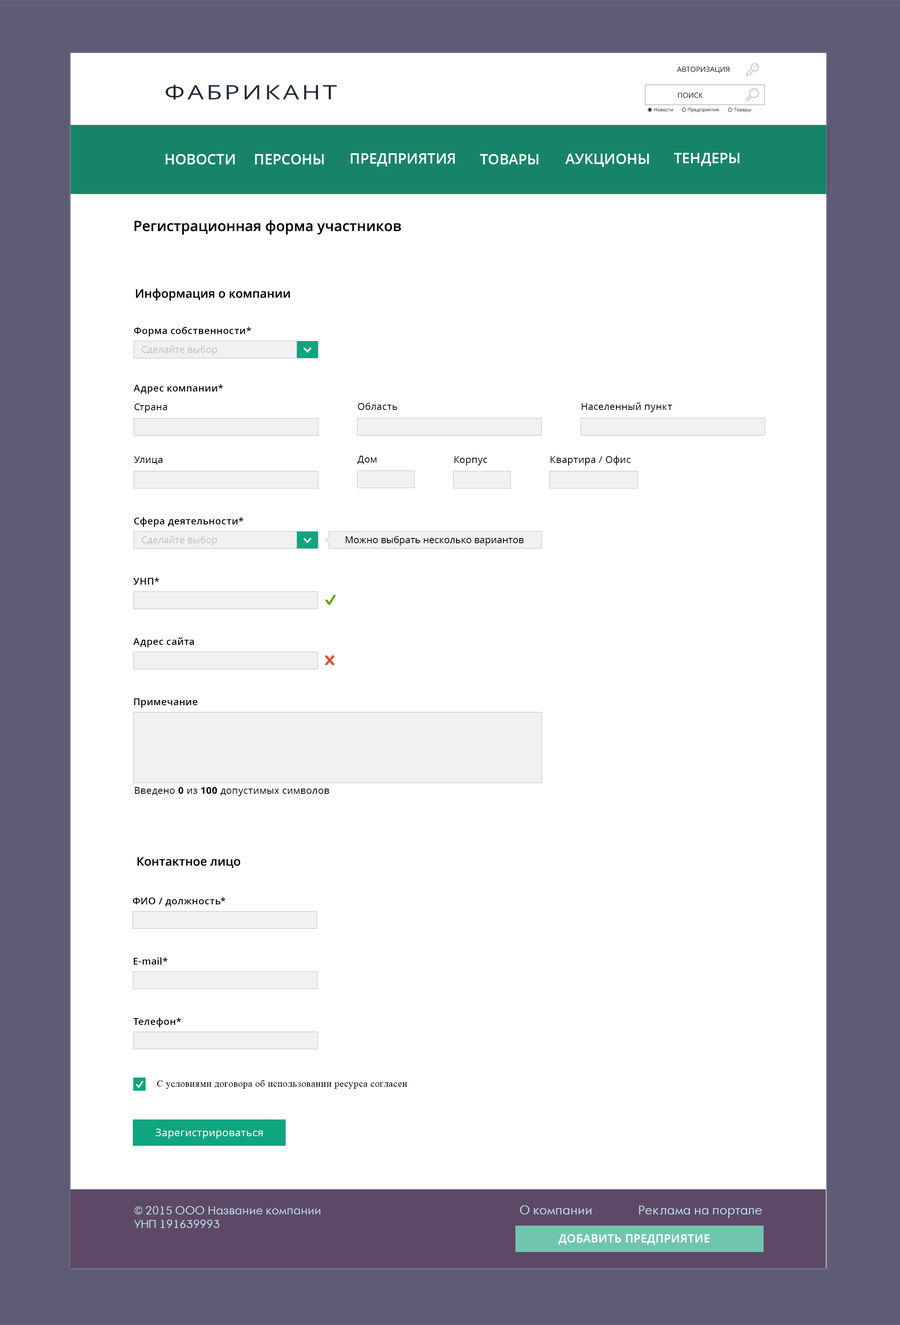
<style>
.page{position:relative;width:900px;height:1325px;background:#ffffff}
.page>*{position:absolute;margin:0}
.t1{font:7.2px "OpenSans";color:#000000;text-transform:uppercase}
.t2{font:20px "OpenSans";letter-spacing:0.1em;color:#1c2a36;scale:1.28 1}
.t3{font:4.8px "OpenSans";color:#404040}
.t4{font:14.4px "OpenSans-Semibold";color:#ffffff}
.t5{font:14.4px "OpenSans-Semibold";color:#000000}
.t6{font:12px "OpenSans-Semibold";color:#000000}
.t7{font:9.6px "OpenSans-Semibold";letter-spacing:0.025em;color:#010101}
.t8{font:9.6px "OpenSans";color:#c1c1c1}
.t9{font:9.6px "OpenSans";letter-spacing:0.025em;color:#010101}
.t10{font:9.6px "OpenSans";color:#000000}
.t11{font:9.6px "OpenSans-Bold";letter-spacing:0.025em;color:#010101}
.t12{font:9.6px "TimesNewRomanPSMT";letter-spacing:0.025em;color:#010101}
.t13{font:10.4px "OpenSans";letter-spacing:0.025em;color:#fffefe}
.t14{font:11.2px "AFuturaOrto";color:#bbdde3}
.t15{font:12px "AFuturaOrto";color:#bbdde3}
.t16{font:11.2px "OpenSans-Semibold";color:#ffffff;font-weight:bold}
</style>
<div class="page">
<p class="t1" style="left:677px;top:67px;width:52px;height:6px">авторизация</p>
<p class="t2" style="left:166px;top:85px;width:171px;height:15px">ФАБРИКАНТ</p>
<p class="t1" style="left:678px;top:93px;width:25px;height:5px">поиск</p>
<p class="t3" style="left:654px;top:108px;width:19px;height:4px">Новости</p>
<p class="t3" style="left:688px;top:108px;width:31px;height:5px">Предприятия</p>
<p class="t3" style="left:734px;top:108px;width:17px;height:5px">Товары</p>
<p class="t4" style="left:166px;top:154px;width:69px;height:10px">НОВОСТИ</p>
<p class="t4" style="left:255px;top:154px;width:69px;height:10px">ПЕРСОНЫ</p>
<p class="t4" style="left:351px;top:153px;width:104px;height:13px">ПРЕДПРИЯТИЯ</p>
<p class="t4" style="left:480px;top:154px;width:59px;height:10px">ТОВАРЫ</p>
<p class="t4" style="left:565px;top:154px;width:84px;height:13px">АУКЦИОНЫ</p>
<p class="t4" style="left:674px;top:153px;width:66px;height:13px">ТЕНДЕРЫ</p>
<p class="t5" style="left:134px;top:220px;width:267px;height:15px">Регистрационная форма участников</p>
<p class="t6" style="left:136px;top:288px;width:154px;height:13px">Информация о компании</p>
<p class="t7" style="left:134px;top:327px;width:117px;height:9px">Форма собственности*</p>
<p class="t8" style="left:142px;top:345px;width:75px;height:10px">Сделайте выбор</p>
<p class="t7" style="left:134px;top:384px;width:89px;height:10px">Адрес компании*</p>
<p class="t9" style="left:134px;top:403px;width:33px;height:10px">Страна</p>
<p class="t9" style="left:358px;top:403px;width:39px;height:7px">Область</p>
<p class="t9" style="left:582px;top:402px;width:90px;height:10px">Населенный пункт</p>
<p class="t9" style="left:134px;top:456px;width:28px;height:8px">Улица</p>
<p class="t9" style="left:358px;top:456px;width:19px;height:8px">Дом</p>
<p class="t9" style="left:454px;top:456px;width:33px;height:9px">Корпус</p>
<p class="t9" style="left:551px;top:456px;width:80px;height:9px">Квартира / Офис</p>
<p class="t7" style="left:134px;top:517px;width:109px;height:10px">Сфера деятельности*</p>
<p class="t8" style="left:142px;top:535px;width:75px;height:10px">Сделайте выбор</p>
<p class="t10" style="left:346px;top:536px;width:178px;height:9px">Можно выбрать несколько вариантов</p>
<p class="t7" style="left:133px;top:577px;width:26px;height:8px">УНП*</p>
<p class="t7" style="left:133px;top:637px;width:61px;height:10px">Адрес сайта</p>
<p class="t7" style="left:134px;top:698px;width:64px;height:9px">Примечание</p>
<p class="t9" style="left:135px;top:787px;width:194px;height:9px">Введено <span class="t11">0</span> из <span class="t11">100</span> допустимых символов</p>
<p class="t6" style="left:137px;top:857px;width:104px;height:11px">Контактное лицо</p>
<p class="t7" style="left:133px;top:897px;width:92px;height:9px">ФИО / должность*</p>
<p class="t7" style="left:134px;top:957px;width:34px;height:7px">E-mail*</p>
<p class="t7" style="left:133px;top:1017px;width:48px;height:10px">Телефон*</p>
<p class="t12" style="left:157px;top:1080px;width:250px;height:8px">С условиями договора об использовании ресурса согласен</p>
<p class="t13" style="left:156px;top:1128px;width:107px;height:10px">Зарегистрироваться</p>
<p class="t14" style="left:134px;top:1206px;width:186px;height:22px">© 2015 ООО Название компании<br>УНП 191639993</p>
<p class="t15" style="left:520px;top:1205px;width:72px;height:10px">О компании</p>
<p class="t15" style="left:639px;top:1205px;width:123px;height:13px">Реклама на портале</p>
<p class="t16" style="left:559px;top:1234px;width:151px;height:10px">ДОБАВИТЬ ПРЕДПРИЯТИЕ</p>
</div>
